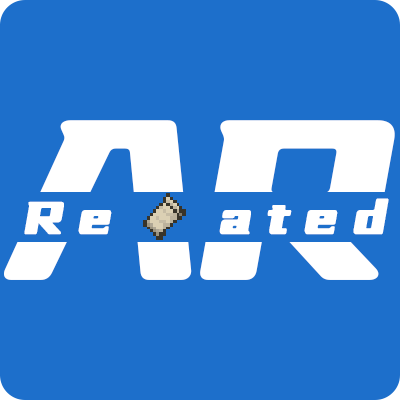
<style>
.page{position:relative;width:400px;height:400px;background:#1d6fcb}
.page>*{position:absolute;margin:0}
.t1{font:67.1px "YouSheBiaoTiYuan";letter-spacing:-0.125em;color:#ffffff;font-weight:bold;font-style:italic}
.t2{font:56.2px "YouSheBiaoTiYuan";letter-spacing:0.2em;color:#ffffff;font-weight:bold;font-style:italic}
</style>
<div class="page">
<p class="t1" style="left:4px;top:120px;width:391px;height:160px">AR</p>
<p class="t2" style="left:24px;top:198px;width:365px;height:37px">Re  ated</p>
</div>
